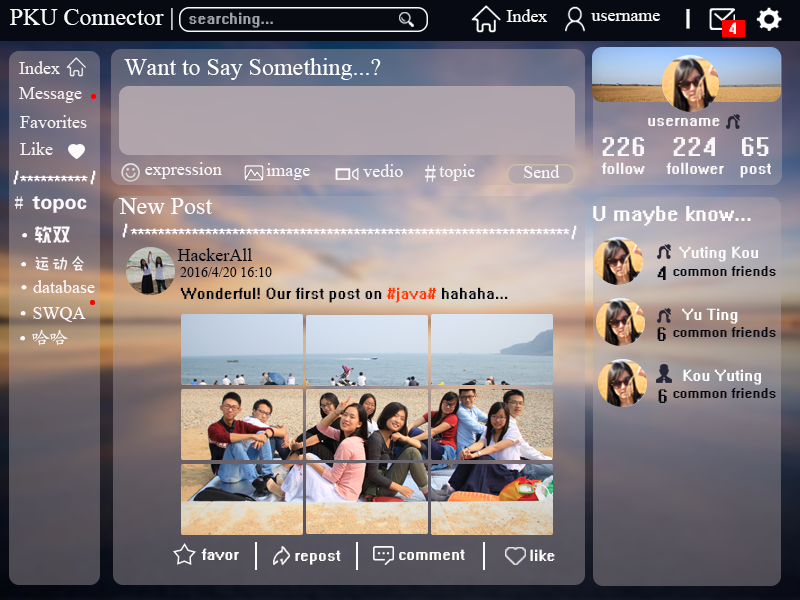
<style>
.page{position:relative;width:800px;height:600px}
.page>*{position:absolute;margin:0}
.t1{font:24px "TimesNewRomanPSMT";color:#fafafa}
.t2{font:18px "System";color:#a0a1a6}
.t3{font:18px "TimesNewRomanPSMT";color:#fafafa}
.t4{font:24px "System";color:#fafafa}
.t5{font:18px "System";color:#f9f6f6}
.t6{font:18px "TimesNewRomanPSMT";color:#f5f1f1}
.t7{font:24px "TimesNewRomanPSMT";color:#fdfdfd}
.t8{font:18px "System";color:#faf7f9}
.t9{font:30px "System";color:#faf7f9}
.t10{font:18px "System";color:#fbf8fb}
.t11{font:18px "TimesNewRomanPSMT";color:#faf7f9}
.t12{font:24px "SimSun-ExtB";color:#faf7f9}
.t13{font:20px "FZZYJW--GB1-0";color:#fbf8fb}
.t14{font:18px "SimSun-ExtB";color:#fbf8fb}
.t15{font:24px "System";color:#fdfdfd}
.t16{font:18px "FZZYJW--GB1-0";color:#fbf8fb}
.t17{font:18px "System";color:#fbfcfb}
.t18{font:18px "FZMWJW--GB1-0";color:#fbf8fb}
.t19{font:18px "TimesNewRomanPSMT";color:#070a13}
.t20{font:14px "TimesNewRomanPSMT";color:#070a13}
.t21{font:22px "System";color:#070a13}
.t22{font:16px "System";color:#070a13}
.t23{font:18px "TimesNewRomanPSMT";color:#fbf8fb}
.t24{font:18px "System";color:#070a13}
.t25{font:18px "System";color:#fd3a06}
.t26{font:18px "FZKTJW--GB1-0";color:#fbf8fb}
.t27{font:18px "System";color:#fefcfb}
</style>
<div class="page">
<p class="t1" style="left:10px;top:8px;width:163px;height:22px">PKU Connector |</p>
<p class="t2" style="left:189px;top:12px;width:84px;height:16px">searching...</p>
<p class="t3" style="left:506px;top:9px;width:42px;height:13px">Index</p>
<p class="t3" style="left:591px;top:13px;width:69px;height:8px">username</p>
<p class="t4" style="left:686px;top:9px;width:4px;height:20px">|</p>
<p class="t5" style="left:729px;top:22px;width:7px;height:12px">4</p>
<p class="t6" style="left:19px;top:61px;width:41px;height:13px">Index</p>
<p class="t7" style="left:124px;top:58px;width:257px;height:22px">Want to Say Something...?</p>
<p class="t6" style="left:19px;top:87px;width:63px;height:16px">Message</p>
<p class="t6" style="left:20px;top:115px;width:67px;height:13px">Favorites</p>
<p class="t8" style="left:648px;top:118px;width:72px;height:8px">username</p>
<p class="t9" style="left:602px;top:137px;width:42px;height:19px">226</p>
<p class="t9" style="left:673px;top:137px;width:42px;height:19px">224</p>
<p class="t9" style="left:742px;top:137px;width:27px;height:19px">65</p>
<p class="t6" style="left:20px;top:142px;width:33px;height:13px">Like</p>
<p class="t10" style="left:13px;top:170px;width:6px;height:15px">/</p>
<p class="t10" style="left:90px;top:170px;width:6px;height:15px">/</p>
<p class="t11" style="left:145px;top:162px;width:77px;height:17px">expression</p>
<p class="t11" style="left:266px;top:163px;width:44px;height:17px">image</p>
<p class="t11" style="left:363px;top:164px;width:40px;height:13px">vedio</p>
<p class="t12" style="left:425px;top:165px;width:11px;height:17px">#</p>
<p class="t11" style="left:439px;top:164px;width:36px;height:17px">topic</p>
<p class="t11" style="left:524px;top:165px;width:36px;height:13px">Send</p>
<p class="t8" style="left:601px;top:162px;width:44px;height:12px">follow</p>
<p class="t8" style="left:666px;top:162px;width:58px;height:12px">follower</p>
<p class="t8" style="left:740px;top:163px;width:31px;height:15px">post</p>
<p class="t10" style="left:20px;top:175px;width:68px;height:7px">**********</p>
<p class="t13" style="left:14px;top:196px;width:73px;height:17px"><span class="t14"># </span>topoc</p>
<p class="t7" style="left:119px;top:198px;width:93px;height:17px">New Post</p>
<p class="t15" style="left:593px;top:206px;width:158px;height:20px">U maybe know...</p>
<p class="t16" style="left:22px;top:226px;width:48px;height:17px"><span class="t10">·</span>软双</p>
<p class="t10" style="left:122px;top:223px;width:6px;height:15px">/</p>
<p class="t10" style="left:130px;top:228px;width:440px;height:7px">*****************************************************************</p>
<p class="t10" style="left:571px;top:225px;width:6px;height:15px">/</p>
<p class="t17" style="left:679px;top:246px;width:79px;height:16px">Yuting Kou</p>
<p class="t18" style="left:21px;top:256px;width:63px;height:15px"><span class="t10">·</span>运动会</p>
<p class="t19" style="left:177px;top:248px;width:75px;height:13px">HackerAll</p>
<p class="t20" style="left:180px;top:267px;width:92px;height:10px">2016/4/20 16:10</p>
<p class="t21" style="left:657px;top:266px;width:9px;height:14px">4</p>
<p class="t22" style="left:673px;top:266px;width:103px;height:10px">common friends</p>
<p class="t23" style="left:21px;top:280px;width:74px;height:13px"><span class="t10">·</span>database</p>
<p class="t24" style="left:180px;top:287px;width:328px;height:16px">Wonderful! Our first post on <span class="t25">#java# </span>hahaha...</p>
<p class="t23" style="left:20px;top:307px;width:66px;height:15px"><span class="t10">·</span>SWQA</p>
<p class="t17" style="left:682px;top:308px;width:56px;height:16px">Yu Ting</p>
<p class="t26" style="left:20px;top:329px;width:48px;height:17px"><span class="t10">·</span>哈哈</p>
<p class="t21" style="left:657px;top:327px;width:9px;height:14px">6</p>
<p class="t22" style="left:673px;top:327px;width:103px;height:10px">common friends</p>
<p class="t17" style="left:683px;top:369px;width:78px;height:16px">Kou Yuting</p>
<p class="t21" style="left:658px;top:389px;width:9px;height:14px">6</p>
<p class="t22" style="left:673px;top:388px;width:103px;height:10px">common friends</p>
<p class="t27" style="left:201px;top:548px;width:38px;height:12px">favor</p>
<p class="t27" style="left:295px;top:550px;width:46px;height:15px">repost</p>
<p class="t27" style="left:399px;top:549px;width:66px;height:11px">comment</p>
<p class="t27" style="left:530px;top:549px;width:25px;height:12px">like</p>
</div>
